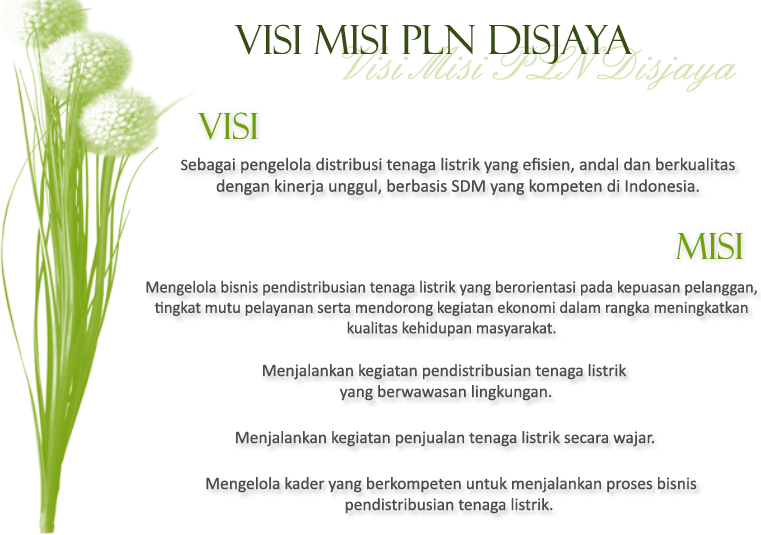
<style>
.page{position:relative;width:761px;height:535px;background:#ffffff}
.page>*{position:absolute;margin:0}
.t1{font:40px "FelixTitlingMT";color:#374c13}
.t2{font:50px "English";color:#d7e4b7}
.t3{font:36px "FelixTitlingMT";color:#79a30f}
.t4{font:18px "Calibri";color:#4b4b4b}
.t5{font:16px "Calibri";color:#4b4b4b}
.t6{font:17px "Calibri";color:#4b4b4b}
.t7{font:17.5px "Calibri";color:#4b4b4b}
</style>
<div class="page">
<p class="t1" style="left:235px;top:24px;width:398px;height:40px">visi misi pln disjaya</p>
<p class="t2" style="left:341px;top:44px;width:396px;height:48px">Visi Misi PLN Disjaya</p>
<p class="t3" style="left:198px;top:112px;width:60px;height:28px">Visi</p>
<p class="t4" style="left:181px;top:157px;width:554px;height:38px;text-align:center"><span class="t5">S</span>ebagai pengelola distribusi tenaga listrik yang efisien, andal dan berkualitas<br>dengan kinerja unggul, berbasis SDM yang kompeten di Indonesia.</p>
<p class="t3" style="left:676px;top:232px;width:67px;height:27px">Misi</p>
<p class="t6" style="left:146px;top:280px;width:611px;height:57px;text-align:center">Mengelola bisnis pendistribusian tenaga listrik yang berorientasi pada kepuasan pelanggan,<br>tingkat mutu pelayanan serta mendorong kegiatan ekonomi dalam rangka meningkatkan<br>kualitas kehidupan masyarakat.</p>
<p class="t7" style="left:263px;top:364px;width:363px;height:37px;text-align:center">Menjalankan kegiatan pendistribusian tenaga listrik <br>yang berwawasan lingkungan.</p>
<p class="t7" style="left:236px;top:431px;width:418px;height:16px">Menjalankan kegiatan penjualan tenaga listrik secara wajar.</p>
<p class="t7" style="left:206px;top:477px;width:491px;height:37px;text-align:center">Mengelola kader yang berkompeten untuk menjalankan proses bisnis<br>pendistribusian tenaga listrik.</p>
</div>
